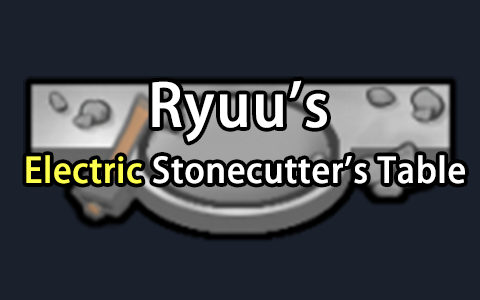
<style>
.page{position:relative;width:480px;height:300px;background:#1a202c}
.page>*{position:absolute;margin:0}
.t1{font:58px "AdobeHeitiStd-Regular";color:#ffffff;font-weight:bold}
.t2{font:34px "AdobeHeitiStd-Regular";color:#ffffff;font-weight:bold}
.t3{font:34px "AdobeHeitiStd-Regular";color:#ffff4d;font-weight:bold}
</style>
<div class="page">
<p class="t1" style="left:152px;top:80px;width:175px;height:62px">Ryuu's</p>
<p class="t2" style="left:26px;top:155px;width:439px;height:29px"><span class="t3">Electric</span> Stonecutter's Table</p>
</div>
